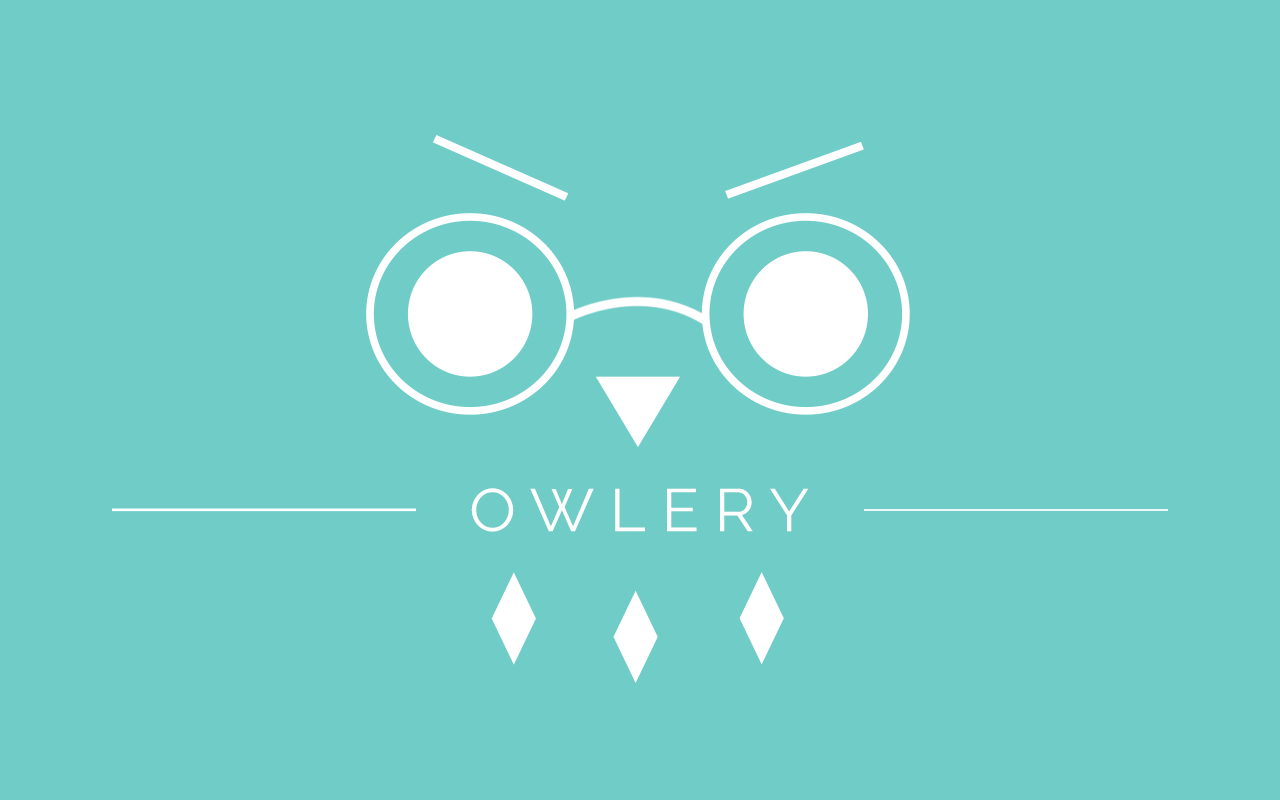
<style>
.page{position:relative;width:1280px;height:800px;background:#70ccc7}
.page>*{position:absolute;margin:0}
.t1{font:60px "Raleway-Regular";letter-spacing:0.25em;color:#fefefe;scale:1.03 1}
</style>
<div class="page">
<p class="t1" style="left:471px;top:488px;width:338px;height:44px">OWLERY</p>
</div>
